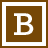
<style>
.page{position:relative;width:48px;height:48px;background:#764706}
.page>*{position:absolute;margin:0}
.t1{font:32px "Rockwell";color:#ffffff;scale:1.17 1}
</style>
<div class="page">
<p class="t1" style="left:14px;top:13px;width:20px;height:22px">B</p>
</div>
